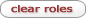
<style>
.page{position:relative;width:86px;height:18px;background:#ffffff}
.page>*{position:absolute;margin:0}
.t1{font:9px "Verdana";letter-spacing:-0.02em;color:#993333;font-weight:bold;scale:1.3 1}
</style>
<div class="page">
<p class="t1" style="left:11px;top:5px;width:62px;height:8px">clear roles</p>
</div>
